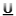
<style>
.page{position:relative;width:16px;height:16px;background:#ffffff}
.page>*{position:absolute;margin:0}
.t1{font:14px "Tahoma-Bold";text-decoration:underline}
</style>
<div class="page">
<p class="t1" style="left:2px;top:3px;width:12px;height:13px">U</p>
</div>
